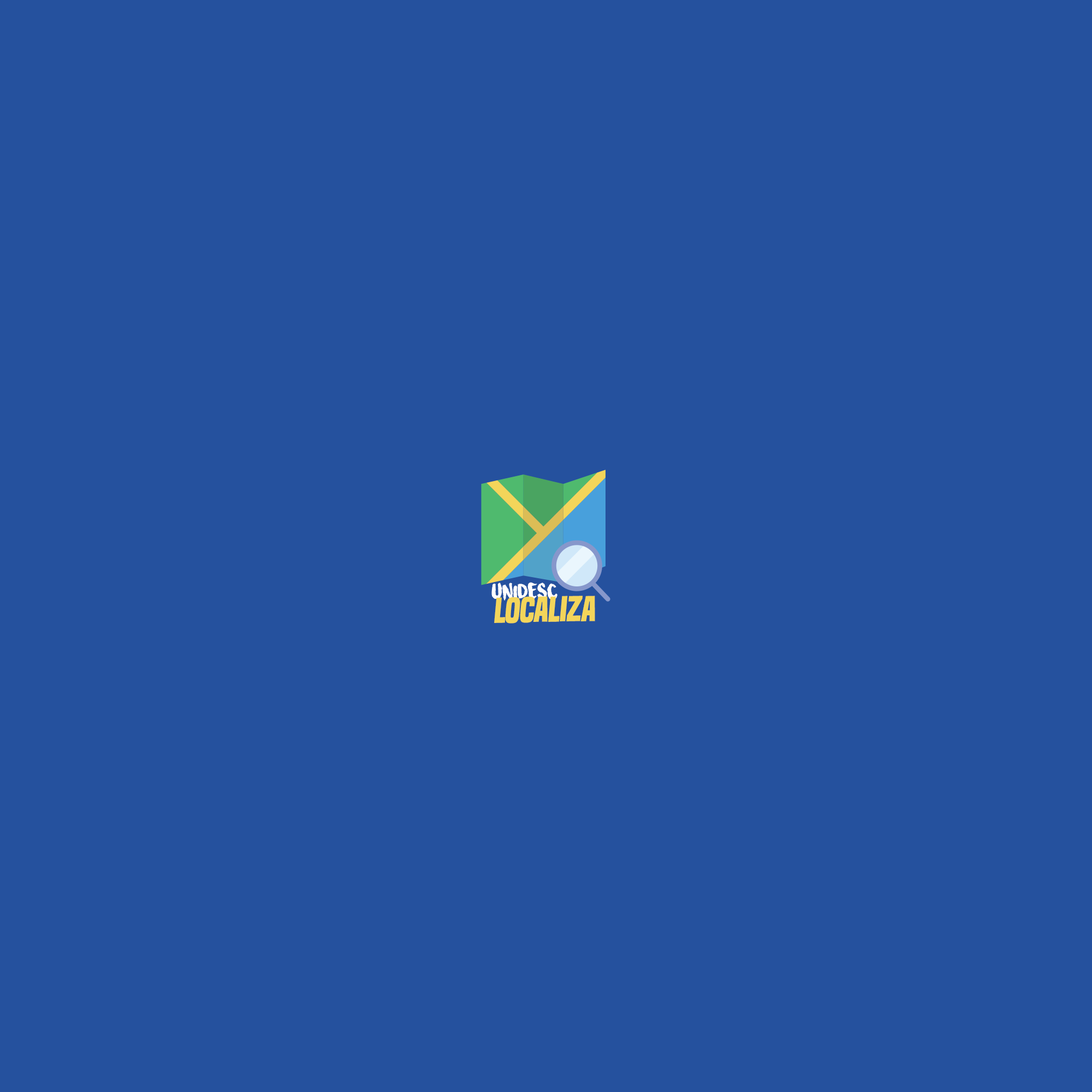
<style>
.page{position:relative;width:1092px;height:1092px;background:#25519e}
.page>*{position:absolute;margin:0}
.t1{font:17px "SurfingCapital";letter-spacing:0.04em;color:#ffffff}
.t2{font:33.4px "BuiltTitlingRg-Bold";letter-spacing:-0.02em;color:#f3d55a}
</style>
<div class="page">
<p class="t1" style="left:491px;top:582px;width:66px;height:19px">UNIDESC</p>
<p class="t2" style="left:494px;top:596px;width:101px;height:28px;rotate:-1deg">LOCALIZA</p>
</div>
